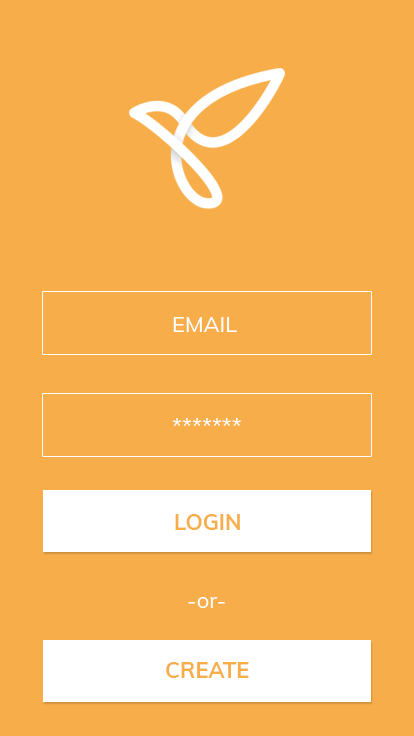
<style>
.page{position:relative;width:414px;height:736px;background:#f7ae4a}
.page>*{position:absolute;margin:0}
.t1{font:22px "Muli-Regular";color:#ffffff}
.t2{font:22px "Muli-Bold";color:#f7ae4a}
</style>
<div class="page">
<p class="t1" style="left:173px;top:317px;width:64px;height:15px">EMAIL</p>
<p class="t1" style="left:172px;top:418px;width:69px;height:8px">*******</p>
<p class="t2" style="left:175px;top:514px;width:65px;height:16px">LOGIN</p>
<p class="t1" style="left:188px;top:597px;width:37px;height:11px">-or-</p>
<p class="t2" style="left:166px;top:662px;width:83px;height:16px">CREATE</p>
</div>
